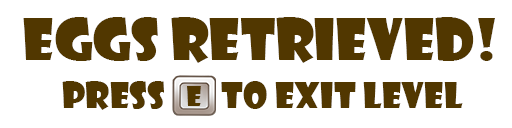
<style>
.page{position:relative;width:512px;height:128px;background:#ffffff}
.page>*{position:absolute;margin:0}
.t1{font:56.4px "ShowcardGothic-Reg";color:#513700}
.t2{font:35.3px "ShowcardGothic-Reg";color:#513700}
.t3{font:27.3px "ShowcardGothic-Reg";color:#513700}
</style>
<div class="page">
<p class="t1" style="left:23px;top:17px;width:472px;height:46px">Eggs Retrieved!</p>
<p class="t2" style="left:62px;top:81px;width:401px;height:29px">Press        To Exit Level</p>
<p class="t3" style="left:187px;top:86px;width:14px;height:20px">E</p>
</div>
